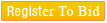
<style>
.page{position:relative;width:107px;height:23px;background:#ffffff}
.page>*{position:absolute;margin:0}
.t1{font:14px "TimesNewRomanPSMT";letter-spacing:0.04em;color:#ffffff}
.t2{font:14px "HelveticaNeueLT-Condensed";letter-spacing:0.04em;color:#ffffff}
</style>
<div class="page">
<p class="t1" style="left:7px;top:5px;width:93px;height:13px"><span class="t2">Regist</span>er To Bid</p>
</div>
